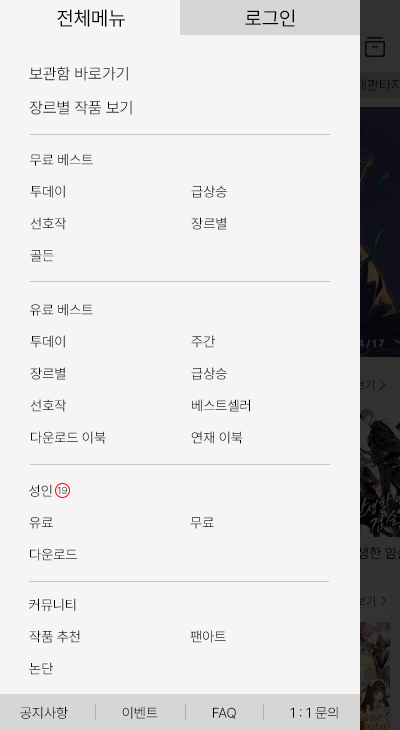
<style>
.page{position:relative;width:400px;height:730px;background:#f5f5f5}
.page>*{position:absolute;margin:0}
.t1{font:20px "Pretendard-Regular";color:#000000}
.t2{font:16px "Pretendard-Light";color:#000000}
.t3{font:14px "Pretendard-Light";color:#000000}
.t4{font:14px "Pretendard-Light"}
.t5{font:10px "Pretendard-Light"}
</style>
<div class="page">
<p class="t1" style="left:57px;top:9px;width:68px;height:18px">전체메뉴</p>
<p class="t1" style="left:245px;top:9px;width:50px;height:18px">로그인</p>
<p class="t2" style="left:29px;top:66px;width:99px;height:15px">보관함 바로가기</p>
<p class="t2" style="left:29px;top:100px;width:103px;height:15px">장르별 작품 보기</p>
<p class="t3" style="left:30px;top:153px;width:63px;height:13px">무료 베스트</p>
<p class="t3" style="left:30px;top:185px;width:35px;height:13px">투데이</p>
<p class="t4" style="left:191px;top:185px;width:36px;height:13px">급상승</p>
<p class="t4" style="left:30px;top:217px;width:36px;height:13px">선호작</p>
<p class="t3" style="left:191px;top:217px;width:36px;height:13px">장르별</p>
<p class="t4" style="left:30px;top:250px;width:24px;height:12px">골든</p>
<p class="t3" style="left:30px;top:303px;width:63px;height:13px">유료 베스트</p>
<p class="t3" style="left:30px;top:335px;width:35px;height:13px">투데이</p>
<p class="t4" style="left:191px;top:335px;width:24px;height:13px">주간</p>
<p class="t3" style="left:30px;top:367px;width:36px;height:13px">장르별</p>
<p class="t4" style="left:191px;top:367px;width:36px;height:13px">급상승</p>
<p class="t4" style="left:30px;top:399px;width:36px;height:13px">선호작</p>
<p class="t3" style="left:192px;top:399px;width:58px;height:13px">베스트셀러</p>
<p class="t3" style="left:31px;top:431px;width:75px;height:13px">다운로드 이북</p>
<p class="t3" style="left:191px;top:431px;width:52px;height:13px">연재 이북</p>
<p class="t3" style="left:29px;top:484px;width:23px;height:13px">성인</p>
<p class="t5" style="left:57px;top:486px;width:10px;height:8px">19</p>
<p class="t4" style="left:29px;top:517px;width:24px;height:12px">유료</p>
<p class="t4" style="left:190px;top:517px;width:24px;height:12px">무료</p>
<p class="t3" style="left:30px;top:548px;width:47px;height:13px">다운로드</p>
<p class="t3" style="left:29px;top:598px;width:47px;height:13px">커뮤니티</p>
<p class="t3" style="left:29px;top:630px;width:51px;height:13px">작품 추천</p>
<p class="t4" style="left:190px;top:630px;width:36px;height:13px">팬아트</p>
<p class="t3" style="left:29px;top:662px;width:24px;height:13px">논단</p>
<p class="t3" style="left:20px;top:706px;width:48px;height:13px">공지사항</p>
<p class="t4" style="left:122px;top:706px;width:36px;height:13px">이벤트</p>
<p class="t3" style="left:213px;top:707px;width:23px;height:12px">FAQ</p>
<p class="t3" style="left:290px;top:706px;width:48px;height:13px">1 : 1 문의</p>
</div>
